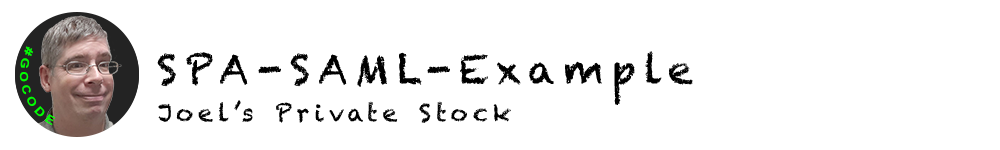
<style>
.page{position:relative;width:1000px;height:150px;background:#ffffff}
.page>*{position:absolute;margin:0}
.t1{font:11.2px "Arial-BoldMT";letter-spacing:0.2em;color:#00ff00}
.t2{font:40px "Chalkduster";letter-spacing:0.2em;color:#000000}
.t3{font:24px "Chalkduster";letter-spacing:0.2em;color:#000000}
</style>
<div class="page">
<p class="t1" style="left:19px;top:46px;width:37px;height:80px;rotate:72deg">#GOCODE</p>
<p class="t2" style="left:157px;top:51px;width:536px;height:54px">SPA-SAML-Example</p>
<p class="t3" style="left:158px;top:100px;width:353px;height:23px">Joel’s Private Stock</p>
</div>
